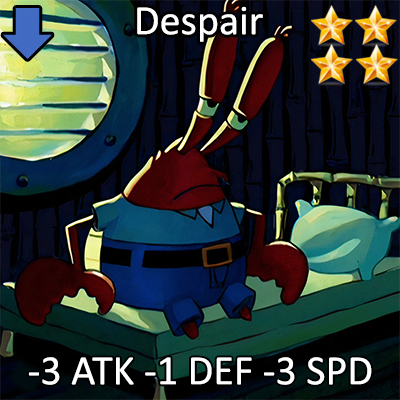
<style>
.page{position:relative;width:400px;height:400px}
.page>*{position:absolute;margin:0}
.t1{font:72px "Calibri";color:#ffffff}
</style>
<div class="page">
<p class="t1" style="left:137px;top:6px;width:126px;height:36px">Despair</p>
<p class="t1" style="left:28px;top:357px;width:344px;height:28px">-3 ATK -1 DEF -3 SPD</p>
</div>
